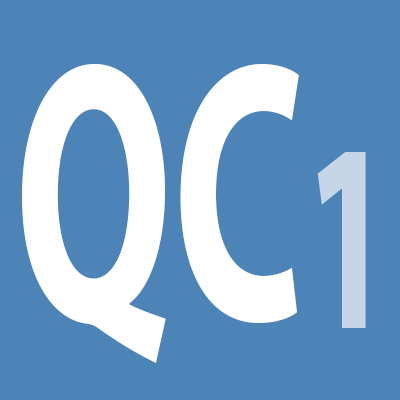
<style>
.page{position:relative;width:400px;height:400px;background:#4c84b8}
.page>*{position:absolute;margin:0}
.t1{font:373.1px "MyriadPro-Bold";color:#ffffff;scale:0.59 1}
.t2{font:270px "MyriadPro-Bold";color:#c7d6e6;scale:0.59 1}
</style>
<div class="page">
<p class="t1" style="left:22px;top:63px;width:277px;height:300px">QC</p>
<p class="t2" style="left:317px;top:152px;width:49px;height:176px">1</p>
</div>
